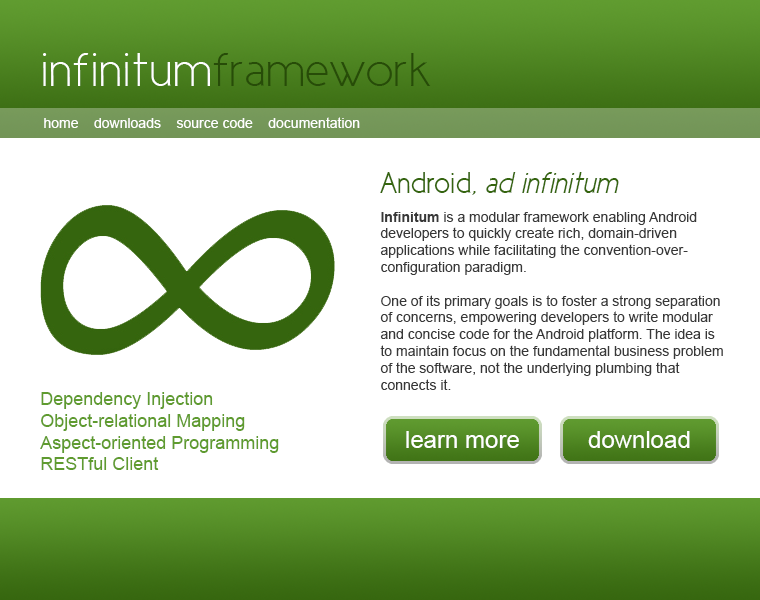
<style>
.page{position:relative;width:760px;height:600px;background:#ffffff}
.page>*{position:absolute;margin:0}
.t1{font:48.2px "CicleFina";color:#ffffff;scale:1.1 1}
.t2{font:48.2px "CicleFina";color:#274c08;scale:1.1 1}
.t3{font:14px "ArialMT";color:#ffffff}
.t4{font:30px "CicleSemiItalic";color:#35650e}
.t5{font:30px "CicleSemi";color:#35650e}
.t6{font:14px "ArialMT";color:#383838}
.t7{font:14px "Arial-BoldMT";color:#383838}
.t8{font:18px "ArialMT";color:#5f9b2f}
.t9{font:24px "ArialMT";color:#ffffff}
</style>
<div class="page">
<p class="t1" style="left:43px;top:53px;width:388px;height:33px">infinitum<span class="t2">framework</span></p>
<p class="t3" style="left:44px;top:117px;width:316px;height:11px">home    downloads    source code    documentation</p>
<p class="t4" style="left:380px;top:172px;width:239px;height:23px"><span class="t5">Android, </span>ad infinitum</p>
<p class="t6" style="left:380px;top:212px;width:343px;height:178px"><span class="t7">Infinitum</span> is a modular framework enabling Android<br>developers to quickly create rich, domain-driven<br>applications while facilitating the convention-over-<br>configuration paradigm.<br><br>One of its primary goals is to foster a strong separation<br>of concerns, empowering developers to write modular<br>and concise code for the Android platform. The idea is<br>to maintain focus on the fundamental business problem<br>of the software, not the underlying plumbing that<br>connects it.</p>
<p class="t8" style="left:40px;top:392px;width:239px;height:78px">Dependency Injection<br>Object-relational Mapping<br>Aspect-oriented Programming<br>RESTful Client</p>
<p class="t9" style="left:406px;top:431px;width:113px;height:17px">learn more</p>
<p class="t9" style="left:588px;top:431px;width:102px;height:17px">download</p>
</div>
